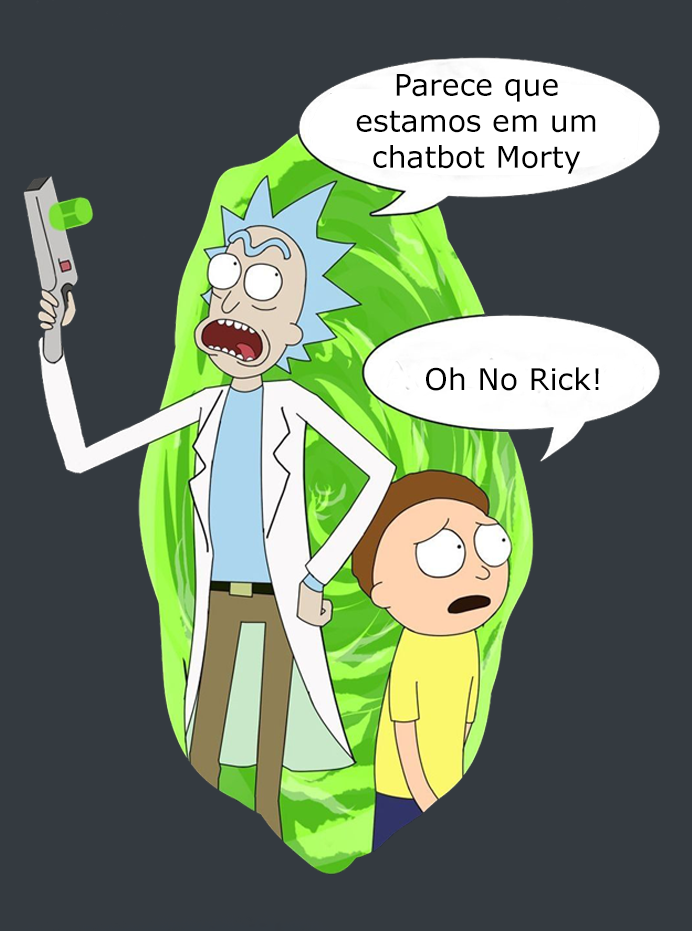
<style>
.page{position:relative;width:692px;height:931px;background:#343a40}
.page>*{position:absolute;margin:0}
.t1{font:30px "Verdana";color:#000000}
</style>
<div class="page">
<p class="t1" style="left:356px;top:74px;width:240px;height:100px;text-align:center">Parece que estamos em um chatbot Morty</p>
<p class="t1" style="left:426px;top:367px;width:173px;height:24px">Oh No Rick!</p>
</div>
